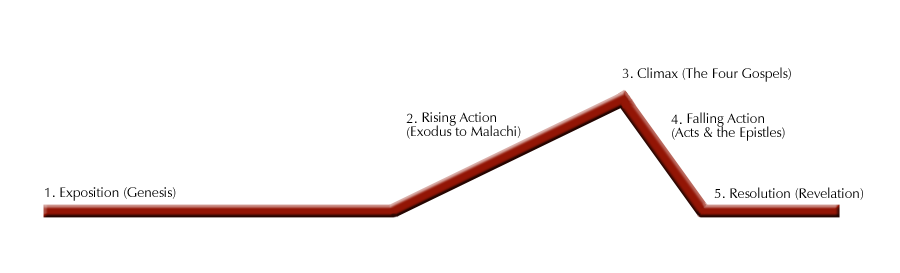
<style>
.page{position:relative;width:900px;height:273px;background:#ffffff}
.page>*{position:absolute;margin:0}
.t1{font:13.9px "ZapfHumanist601BT-Roman";color:#000000}
.t2{font:13.9px/14px "ZapfHumanist601BT-Roman";color:#000000}
.t3{font:13.9px/5px "ZapfHumanist601BT-Roman";color:#000000}
</style>
<div class="page">
<p class="t1" style="left:622px;top:67px;width:169px;height:15px">3. Climax (The Four Gospels)</p>
<p class="t2" style="left:406px;top:112px;width:115px;height:27px"><span class="t3">2. Rising Action<br></span>(Exodus to Malachi)</p>
<p class="t2" style="left:671px;top:112px;width:114px;height:29px"><span class="t3">4. Falling Action<br></span>(Acts &amp; the Epistles)</p>
<p class="t1" style="left:45px;top:187px;width:131px;height:14px">1. Exposition (Genesis)</p>
<p class="t1" style="left:714px;top:187px;width:149px;height:13px">5. Resolution (Revelation)</p>
</div>
